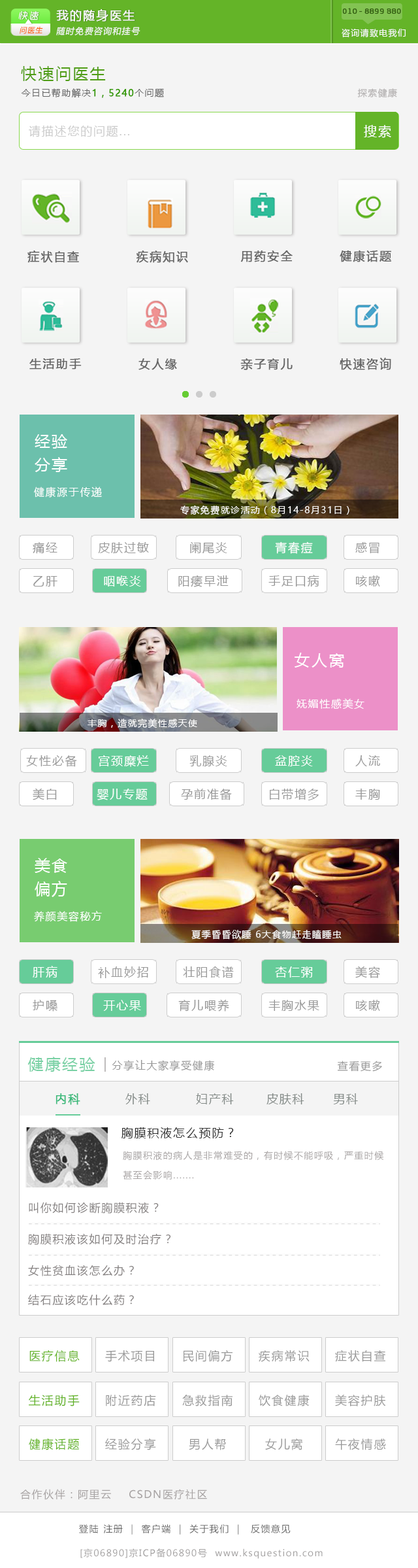
<style>
.page{position:relative;width:418px;height:1568px;background:#f4f4f4}
.page>*{position:absolute;margin:0}
.t1{font:9.2px "RTWSYueRoudGoDemo-Regular";letter-spacing:0.2em;color:#f9f9f9;font-style:italic}
.t2{font:11.8px "MicrosoftYaHei";letter-spacing:0.1em;color:#f9f9f9;font-weight:bold}
.t3{font:7.8px "RTWSYueRoudGoDemo-Regular";color:#366214;font-weight:bold}
.t4{font:7.2px "MicrosoftYaHei";letter-spacing:0.1em;color:#fa6207;font-style:italic}
.t5{font:8.5px "MicrosoftYaHei";letter-spacing:0.1em;color:#f9f9f9;font-style:italic}
.t6{font:8.5px "MicrosoftYaHei";letter-spacing:0.1em;color:#f9f9f9}
.t7{font:15.7px "MicrosoftYaHei";letter-spacing:0.1em;color:#4f9d15}
.t8{font:9.2px "MicrosoftYaHei";letter-spacing:0.1em;color:#666666}
.t9{font:9.2px "MicrosoftYaHei";letter-spacing:0.1em;color:#339900;font-weight:bold}
.t10{font:9.2px "MicrosoftYaHei";letter-spacing:0.1em;color:#b4b1b1}
.t11{font:11.8px "MicrosoftYaHei";letter-spacing:0.1em;color:#cccccc}
.t12{font:13.1px "MicrosoftYaHei";letter-spacing:0.1em;color:#ffffff}
.t13{font:11.8px "MicrosoftYaHei";letter-spacing:0.1em;color:#666666;font-weight:bold}
.t14{font:15.7px/23.5px "MicrosoftYaHei";letter-spacing:0.1em;color:#ffffff}
.t15{font:10.5px "MicrosoftYaHei";letter-spacing:0.1em;color:#ffffff}
.t16{font:9.2px "MicrosoftYaHei";letter-spacing:0.1em;color:#ffffff}
.t17{font:11.8px "MicrosoftYaHei";letter-spacing:0.1em;color:#999999}
.t18{font:11.8px "MicrosoftYaHei";letter-spacing:0.1em;color:#ffffff}
.t19{font:15.7px "MicrosoftYaHei";letter-spacing:0.1em;color:#ffffff}
.t20{font:15.7px "MicrosoftYaHei";letter-spacing:0.1em;color:#66cc99}
.t21{font:13.1px "MicrosoftYaHei";letter-spacing:0.1em;color:#b3b0b0}
.t22{font:10.5px "MicrosoftYaHei";letter-spacing:0.1em;color:#999999}
.t23{font:11.8px "MicrosoftYaHei";letter-spacing:0.1em;color:#828986}
.t24{font:11.8px "MicrosoftYaHei";letter-spacing:0.1em;color:#3ab97a;font-weight:bold}
.t25{font:11.8px "MicrosoftYaHei";letter-spacing:0.1em;color:#333333}
.t26{font:9.2px/19.6px "MicrosoftYaHei";letter-spacing:0.1em;color:#a8a4a4}
.t27{font:11.1px "MicrosoftYaHei";letter-spacing:0.1em;color:#848080}
.t28{font:11.8px "MicrosoftYaHei";letter-spacing:0.1em;color:#64b428}
.t29{font:10.5px "MicrosoftYaHei";letter-spacing:0.1em;color:#a6a2a2}
.t30{font:9.2px "MicrosoftYaHei";letter-spacing:0.1em;color:#999999}
.t31{font:9.2px "MicrosoftYaHei";letter-spacing:0.1em;color:#a3a1a1}
</style>
<div class="page">
<p class="t1" style="left:18px;top:11px;width:21px;height:9px">快速</p>
<p class="t2" style="left:56px;top:9px;width:79px;height:13px">我的随身医生</p>
<p class="t3" style="left:343px;top:8px;width:58px;height:6px">010 - 8899 880</p>
<p class="t4" style="left:20px;top:26px;width:23px;height:8px">问医生</p>
<p class="t5" style="left:56px;top:27px;width:85px;height:8px">随时免费咨询和挂号</p>
<p class="t6" style="left:342px;top:28px;width:64px;height:9px">咨询请致电我们</p>
<p class="t7" style="left:21px;top:66px;width:85px;height:15px">快速问医生</p>
<p class="t8" style="left:21px;top:88px;width:377px;height:10px">今日已帮助解决<span class="t9">1，5240</span>个问题          <span class="t10">探索健康</span></p>
<p class="t11" style="left:29px;top:125px;width:100px;height:12px">请描述您的问题...</p>
<p class="t12" style="left:364px;top:125px;width:28px;height:13px">搜索</p>
<p class="t13" style="left:27px;top:250px;width:161px;height:13px">症状自查       疾病知识</p>
<p class="t13" style="left:241px;top:250px;width:151px;height:12px">用药安全   健康话题</p>
<p class="t13" style="left:29px;top:358px;width:148px;height:12px">生活助手        女人缘</p>
<p class="t13" style="left:241px;top:358px;width:151px;height:12px">亲子育儿   快速咨询</p>
<p class="t14" style="left:35px;top:434px;width:32px;height:38px;text-align:center">经验<br>分享</p>
<p class="t15" style="left:34px;top:486px;width:68px;height:12px">健康源于传递</p>
<p class="t16" style="left:180px;top:505px;width:170px;height:10px">专家免费就诊活动（8月14-8月31日）</p>
<p class="t17" style="left:33px;top:542px;width:25px;height:12px">痛经</p>
<p class="t17" style="left:98px;top:542px;width:51px;height:11px">皮肤过敏</p>
<p class="t17" style="left:190px;top:542px;width:38px;height:12px">阑尾炎</p>
<p class="t18" style="left:275px;top:541px;width:38px;height:13px">青春痘</p>
<p class="t17" style="left:356px;top:542px;width:24px;height:12px">感冒</p>
<p class="t17" style="left:33px;top:576px;width:25px;height:11px">乙肝</p>
<p class="t18" style="left:104px;top:575px;width:37px;height:12px">咽喉炎</p>
<p class="t17" style="left:179px;top:575px;width:50px;height:12px">阳痿早泄</p>
<p class="t17" style="left:269px;top:575px;width:51px;height:12px">手足口病</p>
<p class="t17" style="left:356px;top:575px;width:25px;height:12px">咳嗽</p>
<p class="t19" style="left:295px;top:653px;width:50px;height:15px">女人窝</p>
<p class="t15" style="left:297px;top:698px;width:68px;height:11px">妩媚性感美女</p>
<p class="t16" style="left:88px;top:719px;width:109px;height:9px">丰胸，造就完美性感天使</p>
<p class="t17" style="left:26px;top:755px;width:51px;height:12px">女性必备</p>
<p class="t18" style="left:99px;top:755px;width:50px;height:12px">宫颈糜烂</p>
<p class="t17" style="left:190px;top:755px;width:38px;height:11px">乳腺炎</p>
<p class="t18" style="left:275px;top:755px;width:38px;height:11px">盆腔炎</p>
<p class="t17" style="left:356px;top:755px;width:25px;height:11px">人流</p>
<p class="t17" style="left:33px;top:788px;width:24px;height:12px">美白</p>
<p class="t18" style="left:97px;top:789px;width:51px;height:11px">婴儿专题</p>
<p class="t17" style="left:181px;top:789px;width:51px;height:11px">孕前准备</p>
<p class="t17" style="left:270px;top:789px;width:49px;height:11px">白带增多</p>
<p class="t17" style="left:356px;top:789px;width:25px;height:11px">丰胸</p>
<p class="t14" style="left:35px;top:858px;width:32px;height:39px;text-align:center">美食<br>偏方</p>
<p class="t15" style="left:34px;top:911px;width:68px;height:11px">养颜美容秘方</p>
<p class="t16" style="left:192px;top:930px;width:150px;height:10px">夏季昏昏欲睡 6大食物赶走瞌睡虫</p>
<p class="t18" style="left:33px;top:966px;width:25px;height:12px">肝病</p>
<p class="t17" style="left:356px;top:966px;width:25px;height:12px">美容</p>
<p class="t17" style="left:98px;top:966px;width:50px;height:12px">补血妙招</p>
<p class="t17" style="left:183px;top:966px;width:51px;height:12px">壮阳食谱</p>
<p class="t18" style="left:275px;top:966px;width:38px;height:12px">杏仁粥</p>
<p class="t17" style="left:33px;top:1000px;width:25px;height:12px">护嗓</p>
<p class="t18" style="left:103px;top:1000px;width:38px;height:11px">开心果</p>
<p class="t17" style="left:179px;top:999px;width:51px;height:13px">育儿喂养</p>
<p class="t17" style="left:269px;top:1000px;width:51px;height:11px">丰胸水果</p>
<p class="t17" style="left:356px;top:1000px;width:25px;height:11px">咳嗽</p>
<p class="t20" style="left:27px;top:1057px;width:68px;height:15px;opacity:0.9">健康经验</p>
<p class="t21" style="left:105px;top:1057px;width:1px;height:15px">|</p>
<p class="t22" style="left:112px;top:1060px;width:102px;height:11px">分享让大家享受健康</p>
<p class="t22" style="left:337px;top:1061px;width:46px;height:11px">查看更多</p>
<p class="t23" style="left:56px;top:1093px;width:302px;height:12px"><span class="t24">内科  </span>外科  妇产科  皮肤科      男科</p>
<p class="t25" style="left:122px;top:1127px;width:112px;height:11px">胸膜积液怎么预防？</p>
<p class="t26" style="left:123px;top:1151px;width:261px;height:29px">胸膜积液的病人是非常难受的，有时候不能呼吸，严重时候甚至会影响.......</p>
<p class="t27" style="left:29px;top:1202px;width:130px;height:12px">叫你如何诊断胸膜积液？</p>
<p class="t27" style="left:28px;top:1233px;width:143px;height:12px">胸膜积液该如何及时治疗？</p>
<p class="t27" style="left:28px;top:1265px;width:106px;height:11px">女性贫血该怎么办？</p>
<p class="t27" style="left:28px;top:1294px;width:106px;height:12px">结石应该吃什么药？</p>
<p class="t28" style="left:29px;top:1350px;width:51px;height:12px">医疗信息</p>
<p class="t17" style="left:183px;top:1350px;width:50px;height:12px">民间偏方</p>
<p class="t17" style="left:259px;top:1350px;width:51px;height:12px">疾病常识</p>
<p class="t17" style="left:335px;top:1350px;width:51px;height:12px">症状自查</p>
<p class="t17" style="left:105px;top:1350px;width:49px;height:12px">手术项目</p>
<p class="t28" style="left:29px;top:1395px;width:51px;height:11px">生活助手</p>
<p class="t17" style="left:106px;top:1394px;width:50px;height:12px">附近药店</p>
<p class="t17" style="left:182px;top:1394px;width:51px;height:12px">急救指南</p>
<p class="t17" style="left:259px;top:1394px;width:51px;height:12px">饮食健康</p>
<p class="t17" style="left:335px;top:1394px;width:51px;height:12px">美容护肤</p>
<p class="t28" style="left:29px;top:1438px;width:51px;height:12px">健康话题</p>
<p class="t17" style="left:105px;top:1438px;width:51px;height:12px">经验分享</p>
<p class="t17" style="left:189px;top:1439px;width:37px;height:11px">男人帮</p>
<p class="t17" style="left:265px;top:1439px;width:38px;height:11px">女儿窝</p>
<p class="t17" style="left:335px;top:1438px;width:51px;height:12px">午夜情感</p>
<p class="t29" style="left:20px;top:1489px;width:187px;height:11px">合作伙伴：阿里云    CSDN医疗社区</p>
<p class="t8" style="left:79px;top:1524px;width:212px;height:11px">登陆 注册  <span class="t30">|</span>  客户端  <span class="t30">|</span>  关于我们  <span class="t30">|</span>   反馈意见</p>
<p class="t31" style="left:80px;top:1548px;width:243px;height:11px">[京06890]京ICP备06890号  www.ksquestion.com</p>
</div>
